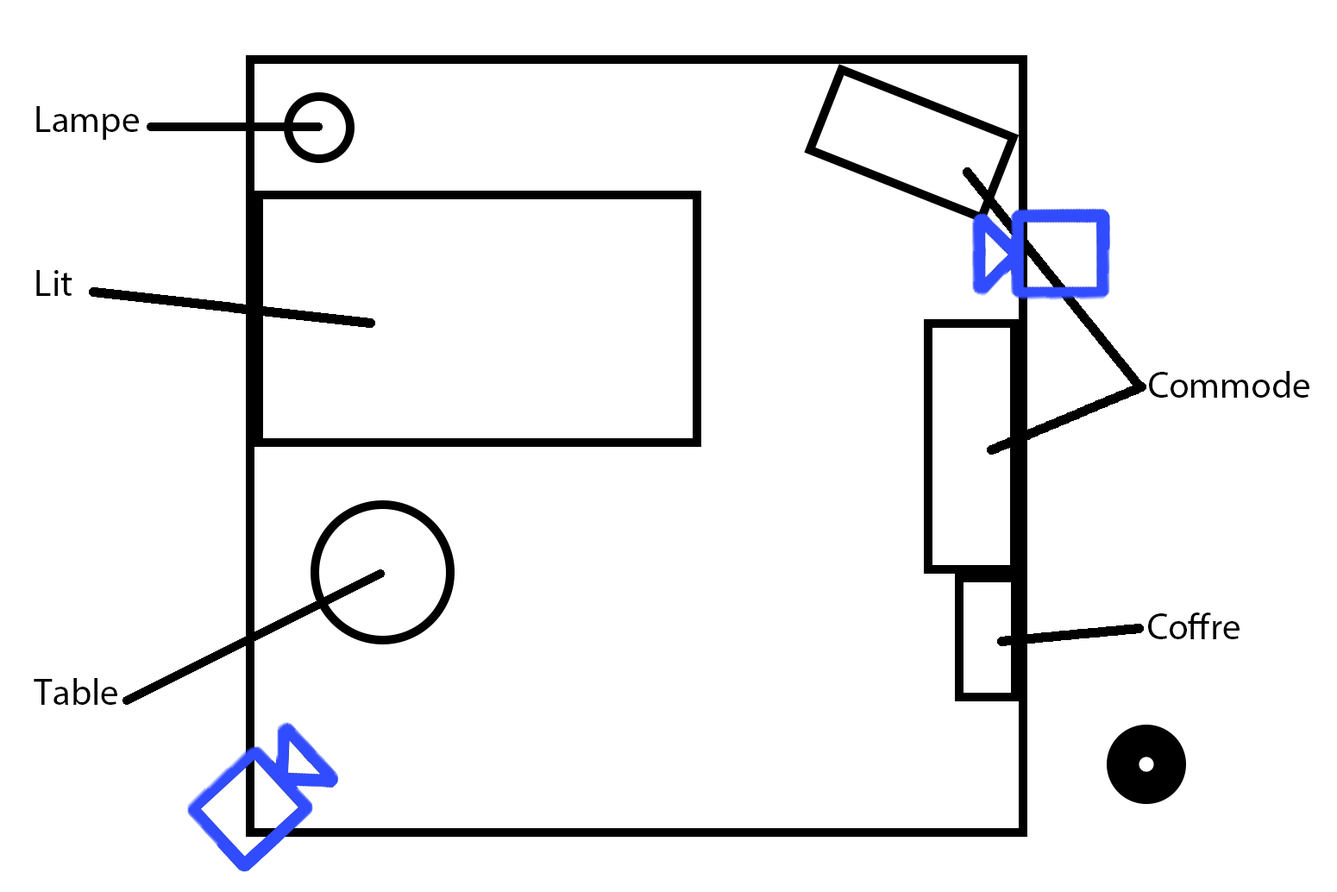
<style>
.page{position:relative;width:1337px;height:892px;background:#ffffff}
.page>*{position:absolute;margin:0}
.t1{font:37.2px "MyriadPro-Regular";color:#000000}
</style>
<div class="page">
<p class="t1" style="left:36px;top:106px;width:103px;height:34px">Lampe</p>
<p class="t1" style="left:36px;top:270px;width:36px;height:26px">Lit</p>
<p class="t1" style="left:1149px;top:371px;width:160px;height:27px">Commode</p>
<p class="t1" style="left:1148px;top:612px;width:92px;height:27px">Coffre</p>
<p class="t1" style="left:34px;top:678px;width:83px;height:27px">Table</p>
</div>
